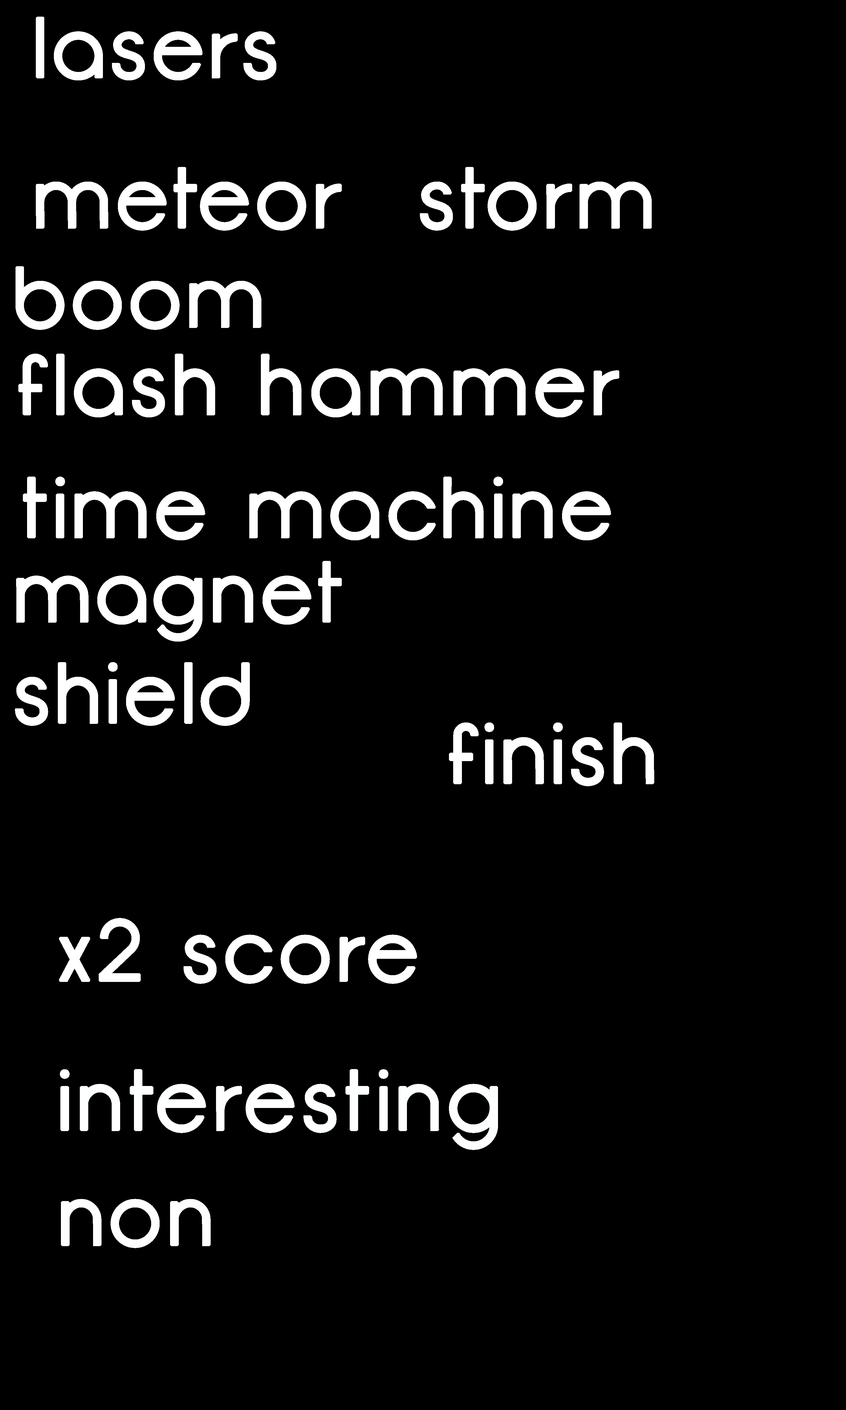
<style>
.page{position:relative;width:846px;height:1410px;background:#000000}
.page>*{position:absolute;margin:0}
.t1{font:84.6px "Opificio";letter-spacing:0.05em;color:#ffffff;font-weight:bold}
.t2{font:84.6px "Opificio";letter-spacing:0.06em;color:#feffff;font-weight:bold}
</style>
<div class="page">
<p class="t1" style="left:36px;top:17px;width:240px;height:63px">lasers</p>
<p class="t1" style="left:36px;top:167px;width:616px;height:64px">meteor  storm</p>
<p class="t1" style="left:16px;top:266px;width:245px;height:64px">boom</p>
<p class="t1" style="left:18px;top:354px;width:601px;height:63px">flash hammer</p>
<p class="t1" style="left:23px;top:476px;width:588px;height:64px">time machine</p>
<p class="t1" style="left:16px;top:561px;width:326px;height:80px">magnet</p>
<p class="t1" style="left:15px;top:662px;width:235px;height:64px">shield</p>
<p class="t1" style="left:449px;top:722px;width:205px;height:64px">finish</p>
<p class="t1" style="left:59px;top:918px;width:358px;height:66px">x2 score</p>
<p class="t2" style="left:60px;top:1069px;width:438px;height:81px">interesting</p>
<p class="t2" style="left:61px;top:1199px;width:150px;height:49px">non</p>
</div>
